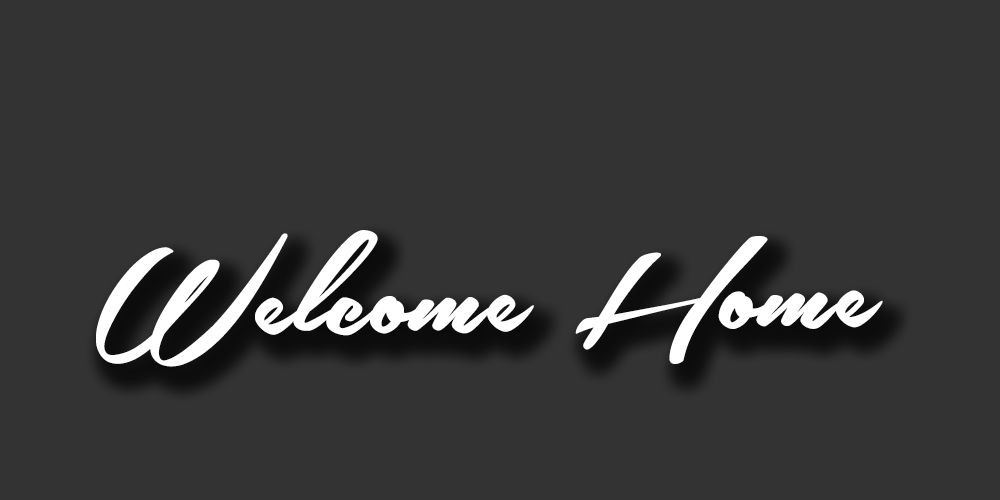
<style>
.page{position:relative;width:1000px;height:500px;background:#333333}
.page>*{position:absolute;margin:0}
.t1{font:181.5px "SouthernAirePersonalUseOnly";color:#ffffff;scale:0.94 1}
</style>
<div class="page">
<p class="t1" style="left:96px;top:230px;width:787px;height:137px;rotate:-1deg">Welcome Home</p>
</div>
